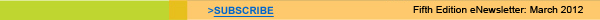
<style>
.page{position:relative;width:600px;height:20px;background:#fec96d}
.page>*{position:absolute;margin:0}
.t1{font:10px "ArialMT";letter-spacing:0.01em;color:#000000}
</style>
<div class="page">
<p class="t1" style="left:413px;top:6px;width:170px;height:7px">Fifth Edition eNewsletter: March 2012</p>
</div>
